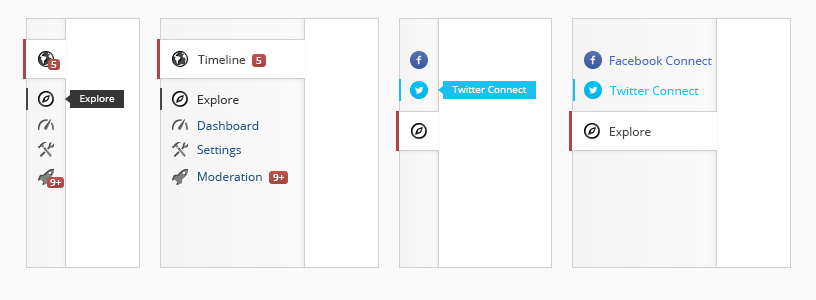
<style>
.page{position:relative;width:816px;height:300px;background:#ffffff}
.page>*{position:absolute;margin:0}
.t1{font:10px "OpenSans-Semibold";color:#ffffff}
.t2{font:12px "OpenSans";color:#454545}
.t3{font:12px "OpenSans";color:#4c6cc2}
.t4{font:10px "OpenSans";color:#fafafa}
.t5{font:12px "OpenSans";color:#18c0ef}
.t6{font:12px "OpenSans";color:#303030}
.t7{font:12px "OpenSans";color:#1f5691}
</style>
<div class="page">
<p class="t1" style="left:51px;top:61px;width:6px;height:7px">5</p>
<p class="t2" style="left:198px;top:55px;width:48px;height:9px">Timeline</p>
<p class="t1" style="left:256px;top:57px;width:6px;height:7px">5</p>
<p class="t3" style="left:610px;top:56px;width:102px;height:9px">Facebook Connect</p>
<p class="t4" style="left:452px;top:86px;width:75px;height:7px">Twitter Connect</p>
<p class="t5" style="left:610px;top:86px;width:89px;height:9px">Twitter Connect</p>
<p class="t4" style="left:80px;top:95px;width:35px;height:9px">Explore</p>
<p class="t6" style="left:198px;top:95px;width:41px;height:12px">Explore</p>
<p class="t7" style="left:198px;top:121px;width:61px;height:9px">Dashboard</p>
<p class="t2" style="left:610px;top:127px;width:41px;height:12px">Explore</p>
<p class="t7" style="left:197px;top:145px;width:44px;height:12px">Settings</p>
<p class="t7" style="left:198px;top:172px;width:64px;height:9px">Moderation</p>
<p class="t1" style="left:273px;top:174px;width:12px;height:7px">9+</p>
<p class="t1" style="left:50px;top:179px;width:12px;height:7px">9+</p>
</div>
